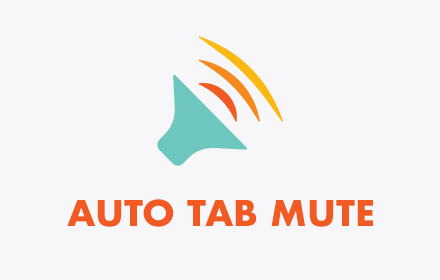
<style>
.page{position:relative;width:440px;height:280px;background:#f7f7f9}
.page>*{position:absolute;margin:0}
.t1{font:34.4px "Futura-Bold";color:#f15a22;scale:1.03 1}
</style>
<div class="page">
<p class="t1" style="left:67px;top:199px;width:306px;height:28px">AUTO TAB MUTE</p>
</div>
